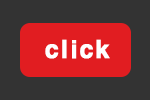
<style>
.page{position:relative;width:150px;height:100px;background:#333333}
.page>*{position:absolute;margin:0}
.t1{font:23.8px "H2gtrE";color:#ffffff;font-weight:bold}
</style>
<div class="page">
<p class="t1" style="left:45px;top:39px;width:65px;height:20px">click</p>
</div>
